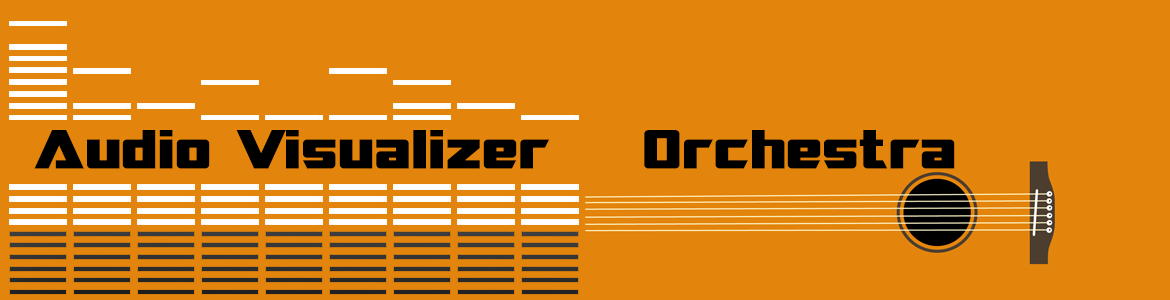
<style>
.page{position:relative;width:1170px;height:300px;background:#e3850c}
.page>*{position:absolute;margin:0}
.t1{font:55px "SFTransRoboticsExtended";color:#000000}
</style>
<div class="page">
<p class="t1" style="left:34px;top:130px;width:516px;height:39px">Audio Visualizer</p>
<p class="t1" style="left:644px;top:130px;width:311px;height:39px">Orchestra</p>
</div>
